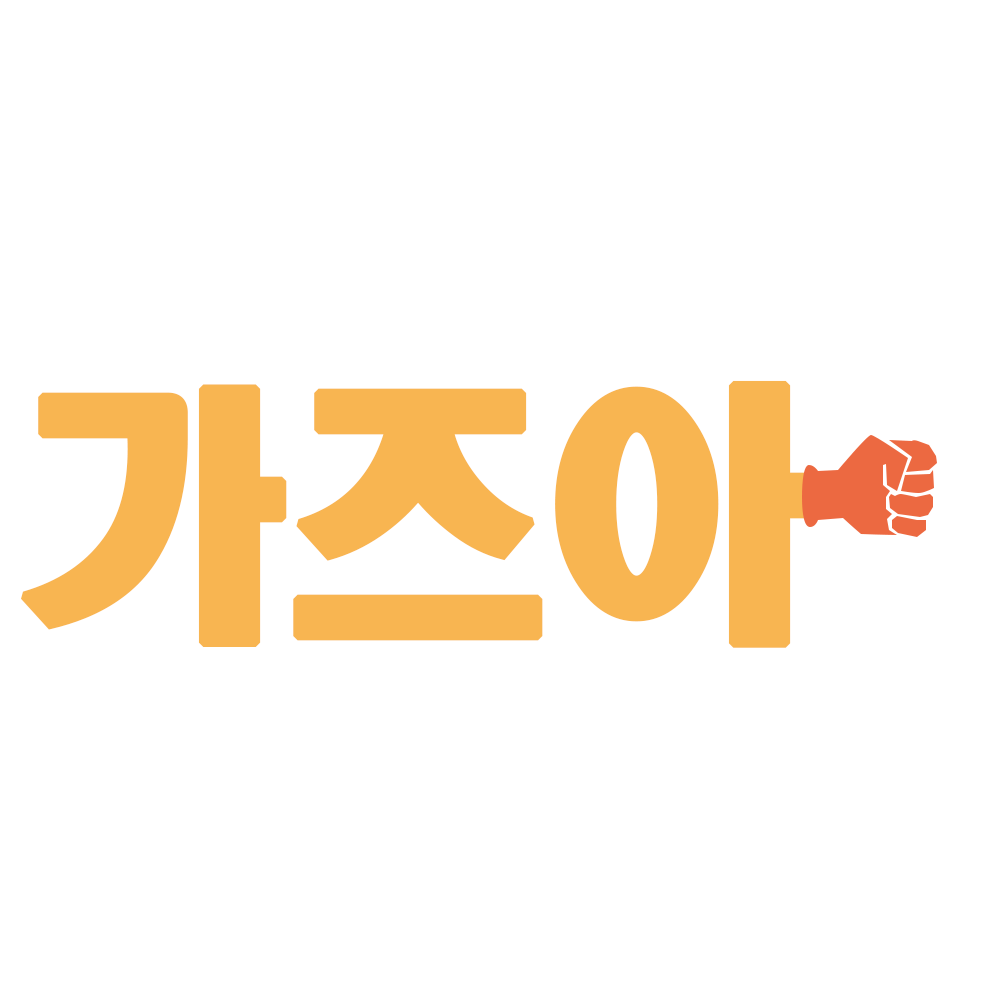
<style>
.page{position:relative;width:1000px;height:1000px;background:#ffffff}
.page>*{position:absolute;margin:0}
.t1{font:268.1px "HeadlineR-HM";letter-spacing:-0.04em;color:#f8b551;font-weight:bold}
</style>
<div class="page">
<p class="t1" style="left:21px;top:380px;width:796px;height:268px">가즈아</p>
</div>
